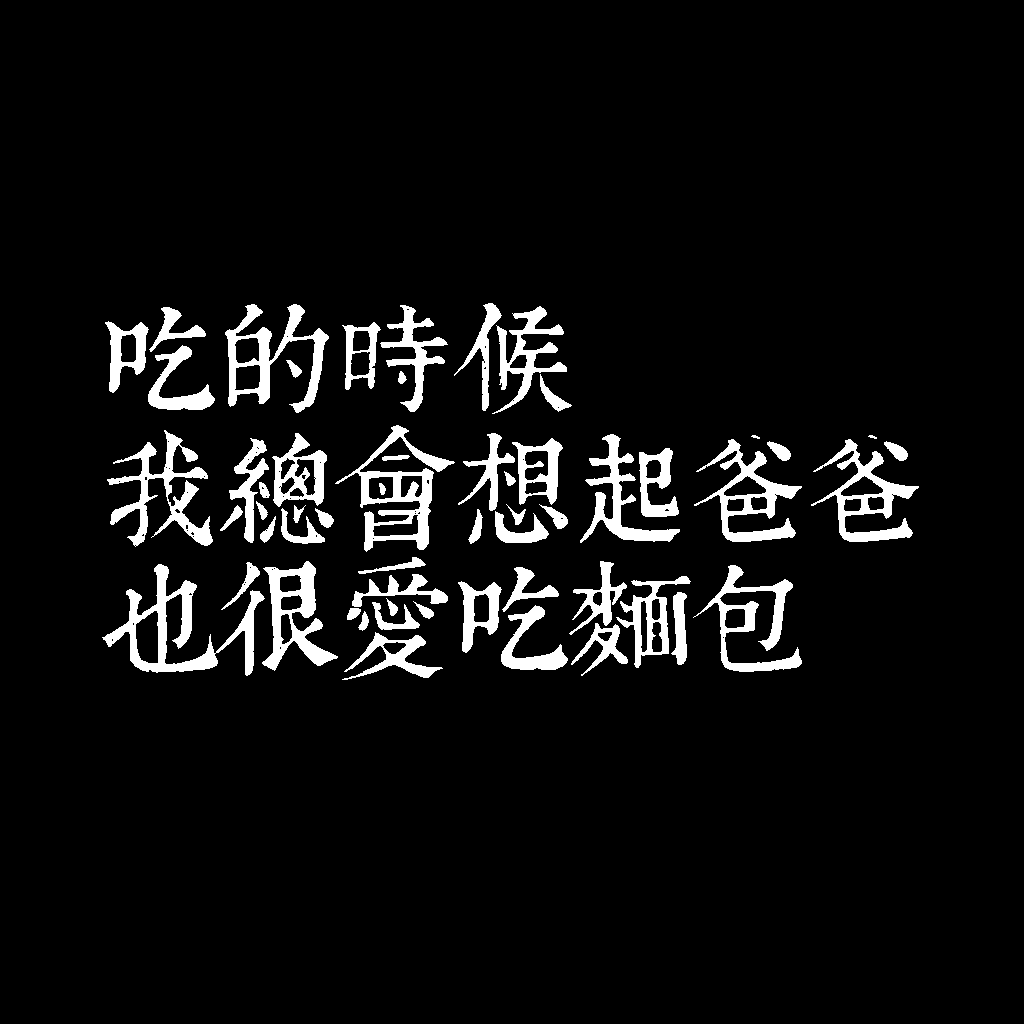
<style>
.page{position:relative;width:1024px;height:1024px;background:#000000}
.page>*{position:absolute;margin:0}
.t1{font:120px/130px "TpldKhangXiDictTrial";letter-spacing:-0.02em;color:#ffffff}
</style>
<div class="page">
<p class="t1" style="left:102px;top:303px;width:817px;height:377px">吃的時候<br>我總會想起爸爸<br>也很愛吃麵包</p>
</div>
